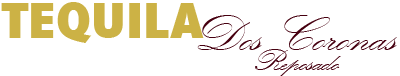
<style>
.page{position:relative;width:400px;height:76px;background:#ffffff}
.page>*{position:absolute;margin:0}
.t1{font:51.3px "Humanist521BT-XtraBoldCondensed";color:#ccb245;scale:1.05 1}
.t2{font:52.2px "KunstlerScript";color:#460010;scale:1.05 1}
.t3{font:31.3px "KunstlerScript";color:#460010;scale:1.05 1}
</style>
<div class="page">
<p class="t1" style="left:1px;top:2px;width:203px;height:41px">TEQUILA</p>
<p class="t2" style="left:197px;top:15px;width:200px;height:35px">Dos Coronas</p>
<p class="t3" style="left:255px;top:49px;width:86px;height:28px">Reposado</p>
</div>
